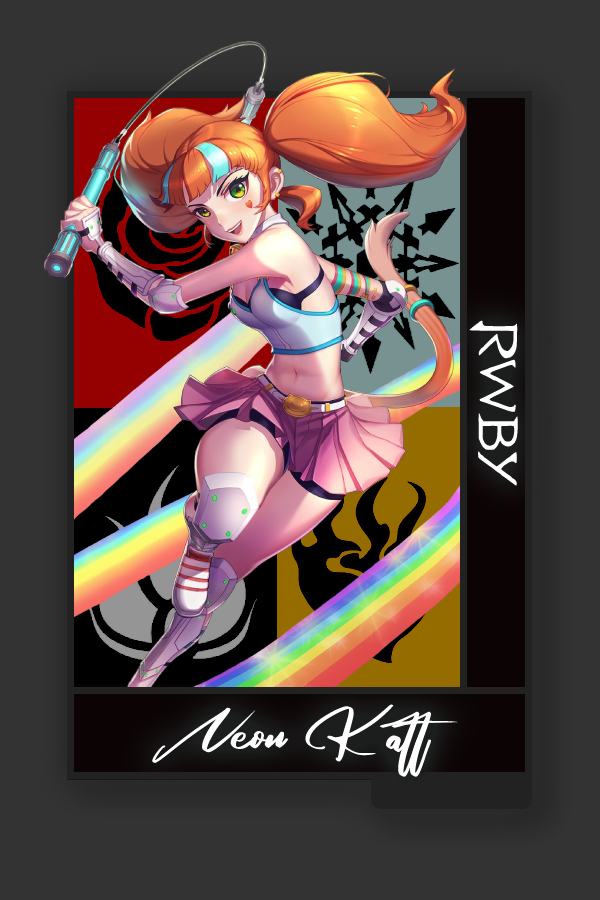
<style>
.page{position:relative;width:600px;height:900px;background:#333333}
.page>*{position:absolute;margin:0}
.t1{font:61.3px "RWBY_Style";color:#ffffff;scale:1.25 1}
.t2{font:76.6px "RosegaFREE";color:#ffffff;scale:0.91 1}
</style>
<div class="page">
<p class="t1" style="left:469px;top:320px;width:49px;height:166px;rotate:90deg">RWBY</p>
<p class="t2" style="left:151px;top:703px;width:308px;height:75px">Neon K\att</p>
</div>
